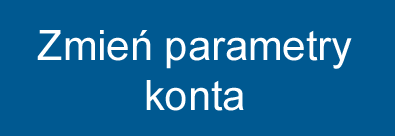
<style>
.page{position:relative;width:395px;height:136px;background:#005991}
.page>*{position:absolute;margin:0}
.t1{font:41.7px "ArialMT";color:#ffffff}
</style>
<div class="page">
<p class="t1" style="left:37px;top:30px;width:315px;height:81px;text-align:center">Zmień parametry konta</p>
</div>
